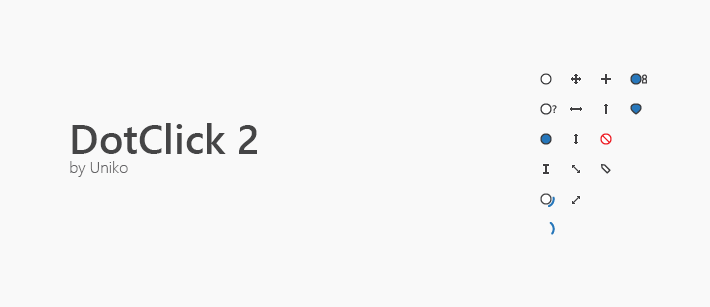
<style>
.page{position:relative;width:710px;height:307px;background:#f9f9f9}
.page>*{position:absolute;margin:0}
.t1{font:41px "SegoeUI-Semibold";color:#454546}
.t2{font:16px "SegoeUI-Light";color:#646365}
</style>
<div class="page">
<p class="t1" style="left:70px;top:123px;width:187px;height:54px">DotClick 2<br><span class="t2">by Uniko</span></p>
</div>
